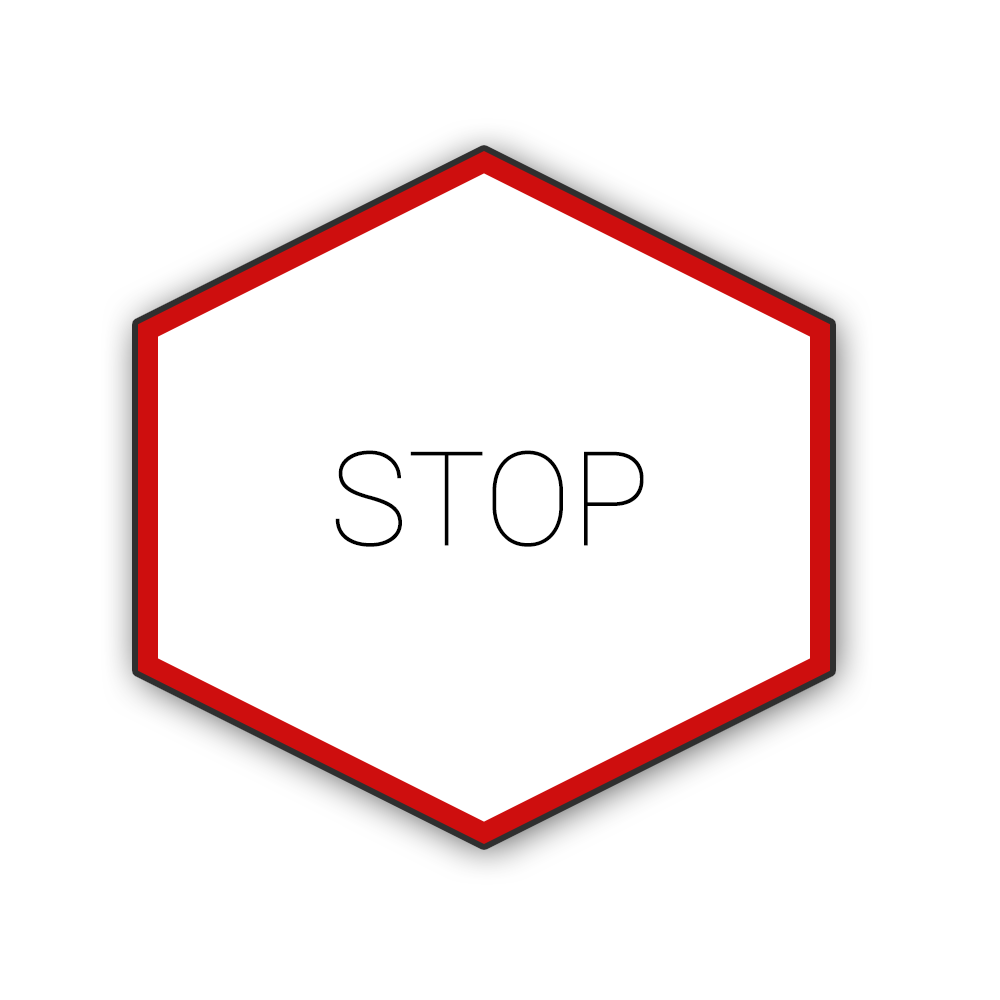
<style>
.page{position:relative;width:1000px;height:1000px;background:#ffffff}
.page>*{position:absolute;margin:0}
.t1{font:131.4px "Roboto-Thin";color:#000000}
</style>
<div class="page">
<p class="t1" style="left:335px;top:450px;width:309px;height:97px">STOP</p>
</div>
